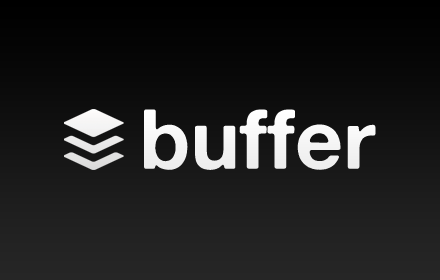
<style>
.page{position:relative;width:440px;height:280px}
.page>*{position:absolute;margin:0}
.t1{font:83.3px "AlteHaasGrotesk_Bold";color:#ffffff}
</style>
<div class="page">
<p class="t1" style="left:144px;top:109px;width:232px;height:61px">buffer</p>
</div>
